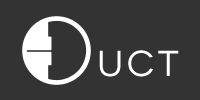
<style>
.page{position:relative;width:200px;height:100px;background:#333333}
.page>*{position:absolute;margin:0}
.t1{font:36px "Novecentowide-Normal";letter-spacing:0.1em;color:#ffffff}
</style>
<div class="page">
<p class="t1" style="left:99px;top:50px;width:80px;height:27px">uct</p>
</div>
